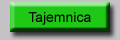
<style>
.page{position:relative;width:120px;height:40px;background:#1ec915}
.page>*{position:absolute;margin:0}
.t1{font:14px "ArialMT";color:#000000}
</style>
<div class="page">
<p class="t1" style="left:28px;top:12px;width:63px;height:13px">Tajemnica</p>
</div>
